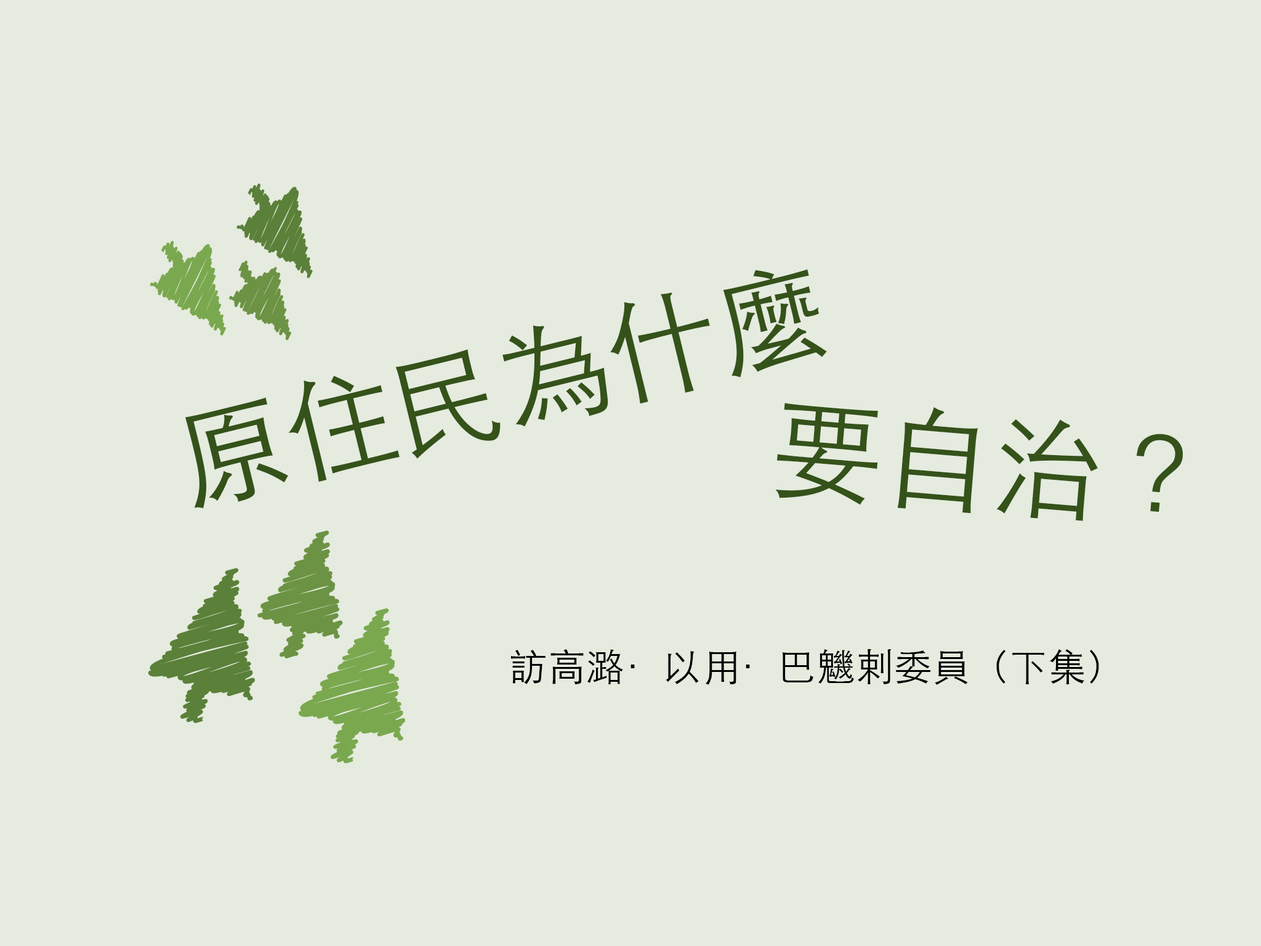
<style>
.page{position:relative;width:1261px;height:946px;background:#e5ebde}
.page>*{position:absolute;margin:0}
.t1{font:110.8px "STHeitiTC-Light";color:#345219}
.t2{font:38.5px "STHeitiTC-Light";color:#000000}
</style>
<div class="page">
<p class="t1" style="left:185px;top:269px;width:642px;height:240px;rotate:-14deg">原住民為什麼</p>
<p class="t1" style="left:775px;top:403px;width:408px;height:118px;rotate:5deg">要自治？</p>
<p class="t2" style="left:511px;top:649px;width:588px;height:36px">訪高潞·以用·巴魕剌委員（下集）</p>
</div>
